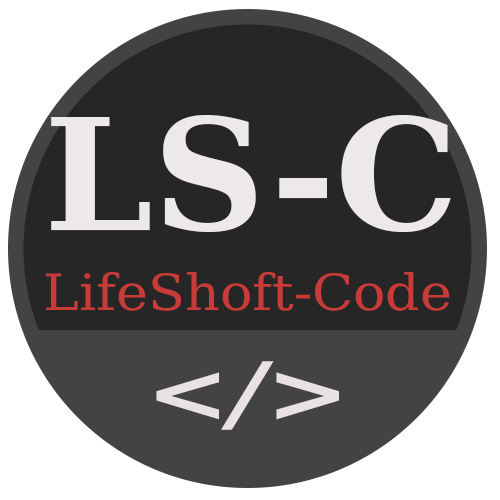
<style>
.page{position:relative;width:500px;height:500px;background:#262626}
.page>*{position:absolute;margin:0}
.t1{font:155.2px "DejaVuSerif-Bold";color:#eee9e9}
.t2{font:49.9px "DejaVuSerifCondensed";color:#c83b38;scale:1.2 1}
.t3{font:83.2px "DejaVuSerif-BoldItalic";color:#e9e2e2;scale:1.2 1}
</style>
<div class="page">
<p class="t1" style="left:51px;top:115px;width:400px;height:117px">LS-C</p>
<p class="t2" style="left:46px;top:272px;width:404px;height:39px">LifeShoft-Code</p>
<p class="t3" style="left:156px;top:361px;width:183px;height:69px">&lt;/&gt;</p>
</div>
